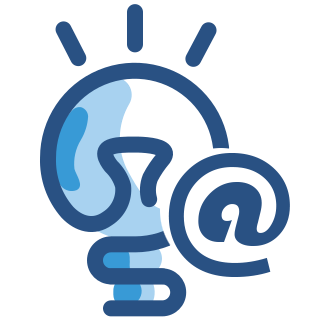
<style>
.page{position:relative;width:320px;height:320px;background:#ffffff}
.page>*{position:absolute;margin:0}
.t1{font:180px "Bauhaus93";color:#295183}
</style>
<div class="page">
<p class="t1" style="left:168px;top:153px;width:122px;height:124px">@</p>
</div>
